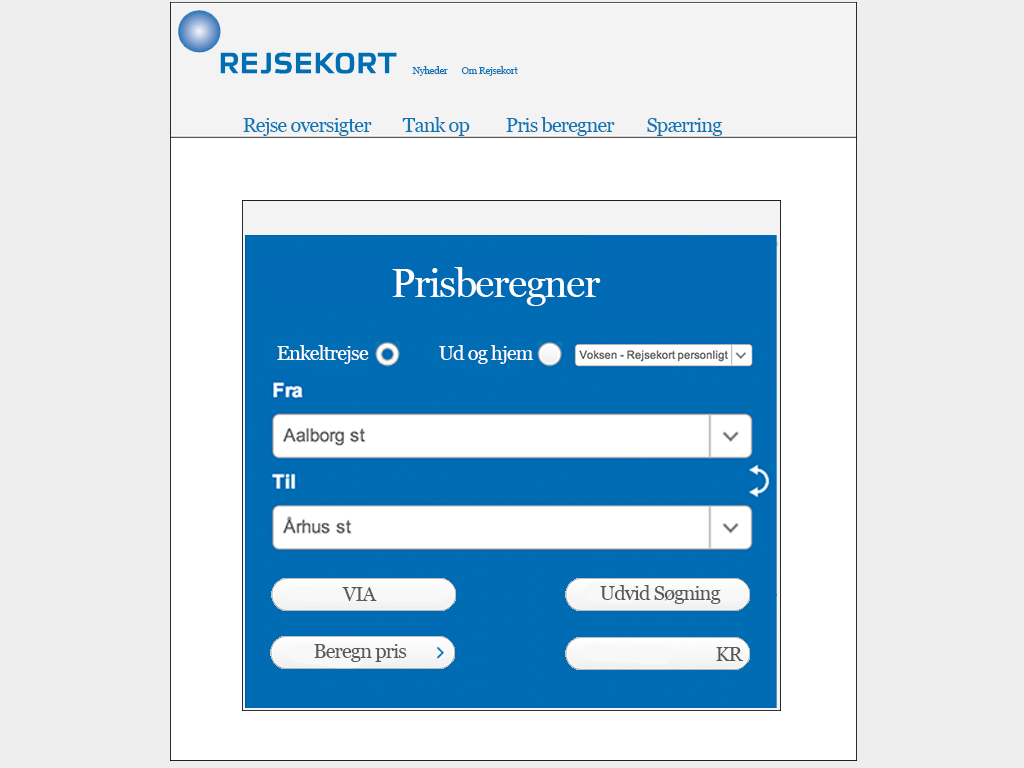
<style>
.page{position:relative;width:1024px;height:768px;background:#eeeeee}
.page>*{position:absolute;margin:0}
.t1{font:10px "Georgia";letter-spacing:-0.04em;color:#0f76b5}
.t2{font:20px "Georgia";letter-spacing:-0.04em;color:#0f76b5}
.t3{font:40px "Georgia";letter-spacing:-0.04em;color:#ffffff}
.t4{font:12px "Georgia";letter-spacing:-0.04em;color:#ffffff}
.t5{font:20px "Georgia";letter-spacing:-0.04em;color:#ffffff}
.t6{font:12px "Georgia";letter-spacing:-0.04em;color:#595959}
</style>
<div class="page">
<p class="t1" style="left:412px;top:66px;width:36px;height:10px">Nyheder</p>
<p class="t1" style="left:461px;top:66px;width:57px;height:10px">Om Rejsekort</p>
<p class="t2" style="left:243px;top:118px;width:129px;height:18px">Rejse oversigter</p>
<p class="t2" style="left:402px;top:117px;width:68px;height:19px">Tank op</p>
<p class="t2" style="left:506px;top:117px;width:109px;height:19px">Pris beregner</p>
<p class="t2" style="left:647px;top:118px;width:76px;height:18px">Spærring</p>
<p class="t3" style="left:392px;top:267px;width:209px;height:39px">Prisberegner</p>
<p class="t4" style="left:277px;top:345px;width:92px;height:19px">Enkeltrejse</p>
<p class="t5" style="left:439px;top:345px;width:95px;height:19px">Ud og hjem</p>
<p class="t6" style="left:342px;top:587px;width:35px;height:14px">VIA</p>
<p class="t6" style="left:600px;top:585px;width:121px;height:19px">Udvid Søgning</p>
<p class="t6" style="left:314px;top:644px;width:93px;height:18px">Beregn pris</p>
<p class="t6" style="left:716px;top:647px;width:27px;height:14px">KR</p>
</div>
